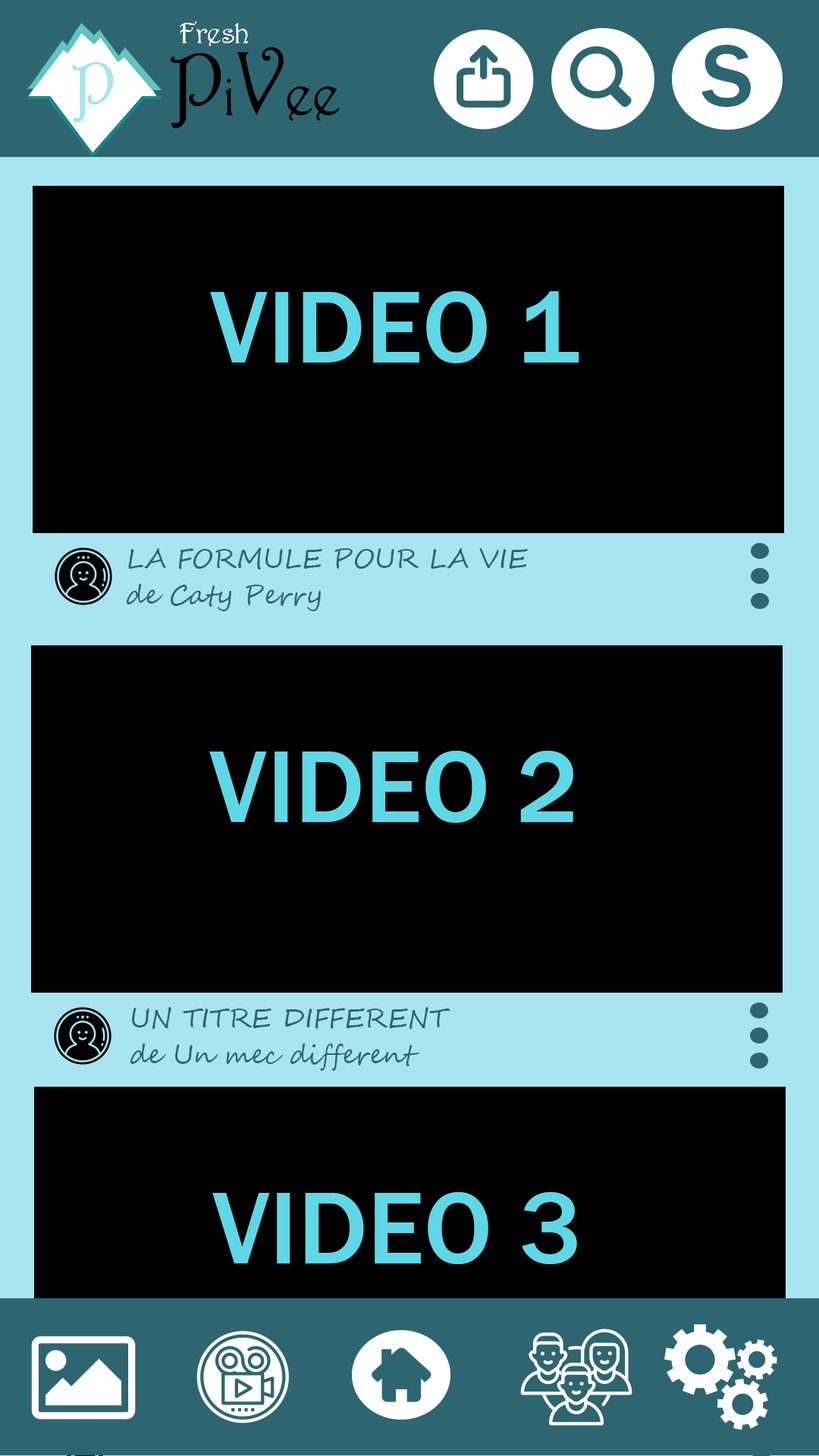
<style>
.page{position:relative;width:819px;height:1456px;background:#000000}
.page>*{position:absolute;margin:0}
.t1{font:30.3px/36.4px "Harrington";color:#ffffff}
.t2{font:91px/36.4px "Harrington";color:#000000}
.t3{font:60.7px/36.4px "Harrington";color:#000000}
.t4{font:91px "FranklinGothic-Medium";color:#2d6670}
.t5{font:106.2px "FranklinGothic-Medium";color:#5ed8e6}
.t6{font:26.5px/36.4px "SegoeScript";color:#2d6670}
</style>
<div class="page">
<p class="t1" style="left:170px;top:21px;width:170px;height:107px">Fresh<br><span class="t2">P</span><span class="t3">i</span><span class="t2">V</span><span class="t3">ee</span></p>
<p class="t4" style="left:701px;top:45px;width:50px;height:62px">S</p>
<p class="t5" style="left:210px;top:291px;width:369px;height:72px">VIDEO 1</p>
<p class="t6" style="left:127px;top:548px;width:401px;height:63px">LA FORMULE POUR LA VIE <br>de Caty Perry</p>
<p class="t5" style="left:209px;top:751px;width:364px;height:72px">VIDEO 2</p>
<p class="t6" style="left:130px;top:1007px;width:320px;height:64px">UN TITRE DIFFERENT<br>de Un mec different</p>
<p class="t5" style="left:212px;top:1192px;width:365px;height:72px">VIDEO 3</p>
</div>
